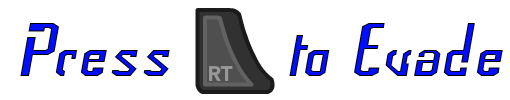
<style>
.page{position:relative;width:510px;height:100px;background:#ffffff}
.page>*{position:absolute;margin:0}
.t1{font:72px "Frak-Regular";color:#000dff}
</style>
<div class="page">
<p class="t1" style="left:20px;top:23px;width:150px;height:53px">Press</p>
<p class="t1" style="left:289px;top:23px;width:214px;height:53px">to Evade</p>
</div>
